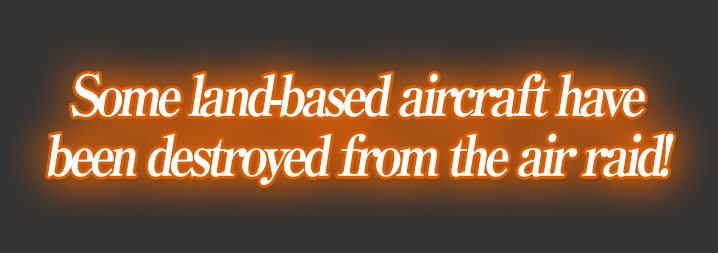
<style>
.page{position:relative;width:718px;height:253px;background:#333333}
.page>*{position:absolute;margin:0}
.t1{font:56px/60px "RyuminPro-ExBold";letter-spacing:-0.1em;color:#ffffff;font-style:italic;scale:0.9 1}
</style>
<div class="page">
<p class="t1" style="left:47px;top:73px;width:627px;height:112px;text-align:center">Some land-based aircraft have<br>been destroyed from the air raid!</p>
</div>
